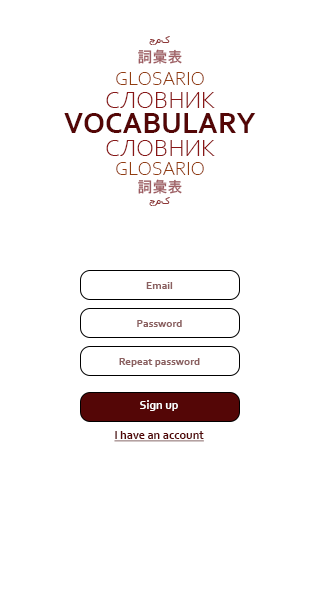
<style>
.page{position:relative;width:320px;height:600px;background:#ffffff}
.page>*{position:absolute;margin:0}
.t1{font:10px "Tahoma";color:#8f3838}
.t2{font:15px "MS-Gothic";color:#9d5b60}
.t3{font:20px "CorbelLight";color:#923d10}
.t4{font:25px "CorbelLight";color:#891616}
.t5{font:30px "Corbel-Bold";color:#540606}
.t6{font:11px "Corbel-Bold";color:#8b6060}
.t7{font:12px "Corbel-Bold";color:#ffffff}
.t8{font:12px "Corbel-Bold";color:#540606;text-decoration:underline}
</style>
<div class="page">
<p class="t1" style="left:149px;top:36px;width:21px;height:9px">چمک</p>
<p class="t2" style="left:138px;top:49px;width:44px;height:15px">詞彙表</p>
<p class="t3" style="left:116px;top:72px;width:88px;height:13px">GLOSARIO</p>
<p class="t4" style="left:106px;top:92px;width:109px;height:16px">СЛОВНИК</p>
<p class="t5" style="left:64px;top:113px;width:192px;height:20px">VOCABULARY</p>
<p class="t4" style="left:106px;top:140px;width:109px;height:16px">СЛОВНИК</p>
<p class="t3" style="left:116px;top:162px;width:88px;height:13px">GLOSARIO</p>
<p class="t2" style="left:138px;top:179px;width:44px;height:15px">詞彙表</p>
<p class="t1" style="left:149px;top:197px;width:21px;height:9px">چمک</p>
<p class="t6" style="left:146px;top:282px;width:27px;height:7px">Email</p>
<p class="t6" style="left:137px;top:320px;width:45px;height:7px">Password</p>
<p class="t6" style="left:119px;top:358px;width:81px;height:9px">Repeat password</p>
<p class="t7" style="left:140px;top:400px;width:38px;height:11px">Sign up</p>
<p class="t8" style="left:114px;top:431px;width:90px;height:11px">l have an aсcount</p>
</div>
